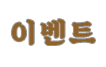
<style>
.page{position:relative;width:106px;height:67px;background:#ffffff}
.page>*{position:absolute;margin:0}
.t1{font:28.6px "SDKukdetopokki-bBd";letter-spacing:0.12em;color:#8f612b}
</style>
<div class="page">
<p class="t1" style="left:12px;top:19px;width:83px;height:26px">이벤트</p>
</div>
